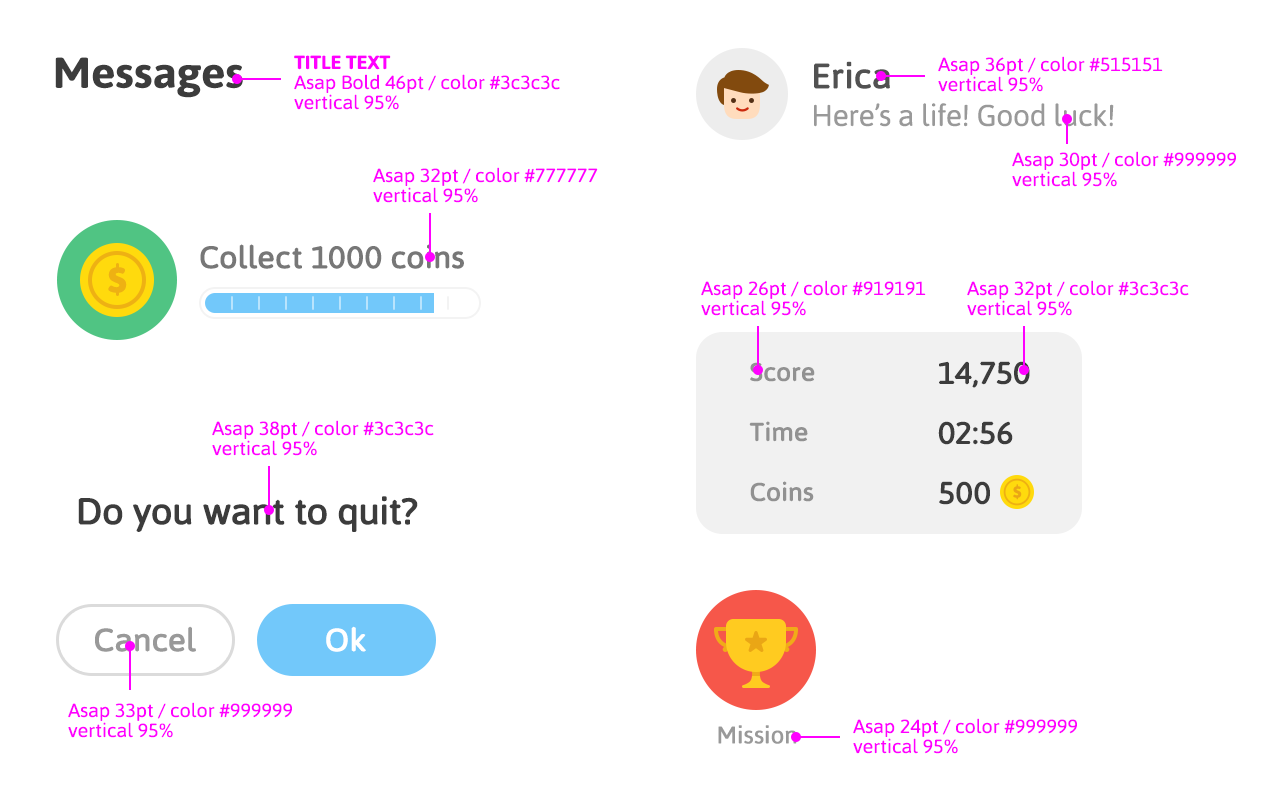
<style>
.page{position:relative;width:1280px;height:800px;background:#ffffff}
.page>*{position:absolute;margin:0}
.t1{font:43.7px "Asap-Bold";letter-spacing:-0.01em;color:#3c3c3c;scale:1.05 1}
.t2{font:19px/20px "Asap-Regular";letter-spacing:-0.01em;color:#ff00ff;scale:1.05 1}
.t3{font:19px/20px "Asap-Bold";letter-spacing:-0.01em;color:#ff00ff;text-transform:uppercase;scale:1.05 1}
.t4{font:34.2px "Asap-Regular";letter-spacing:-0.01em;color:#515151;font-weight:bold;scale:1.05 1}
.t5{font:30px "Asap-Regular";letter-spacing:-0.01em;color:#999999}
.t6{font:30.4px "Asap-Regular";letter-spacing:-0.01em;color:#777777;font-weight:bold;scale:1.05 1}
.t7{font:34.2px "Asap-Bold";letter-spacing:-0.01em;color:#eeb113;font-weight:bold;scale:1.05 1}
.t8{font:24.9px/60px "Asap-Regular";letter-spacing:-0.01em;color:#919191;font-weight:bold;scale:1.05 1}
.t9{font:30.2px/60px "Asap-Regular";letter-spacing:-0.01em;color:#3c3c3c;font-weight:bold;scale:1.05 1}
.t10{font:36.1px "Asap-Regular";letter-spacing:-0.025em;color:#3c3c3c;font-weight:bold;scale:1.05 1}
.t11{font:31.3px "Asap-Regular";letter-spacing:-0.01em;color:#999999;font-weight:bold;scale:1.05 1}
.t12{font:31.3px "Asap-Regular";letter-spacing:-0.01em;color:#ffffff;font-weight:bold;scale:1.05 1}
.t13{font:24px "Asap-Regular";letter-spacing:-0.01em;color:#999999;font-weight:bold}
</style>
<div class="page">
<p class="t1" style="left:55px;top:57px;width:188px;height:41px">Messages</p>
<p class="t2" style="left:294px;top:55px;width:266px;height:55px"><span class="t3">Title Text<br></span>Asap Bold 46pt / color #3c3c3c <br>vertical 95%</p>
<p class="t4" style="left:814px;top:61px;width:76px;height:28px">Erica</p>
<p class="t2" style="left:938px;top:56px;width:225px;height:36px">Asap 36pt / color #515151<br>vertical 95%</p>
<p class="t5" style="left:814px;top:103px;width:300px;height:24px">Here’s a life! Good luck!</p>
<p class="t2" style="left:1012px;top:151px;width:224px;height:36px">Asap 30pt / color #999999<br>vertical 95%</p>
<p class="t2" style="left:373px;top:167px;width:225px;height:36px">Asap 32pt / color #777777<br>vertical 95%</p>
<p class="t6" style="left:200px;top:244px;width:264px;height:25px">Collect 1000 coins</p>
<p class="t7" style="left:108px;top:267px;width:19px;height:26px">S</p>
<p class="t2" style="left:701px;top:280px;width:225px;height:36px">Asap 26pt / color #919191<br>vertical 95%</p>
<p class="t2" style="left:967px;top:280px;width:222px;height:36px">Asap 32pt / color #3c3c3c<br>vertical 95%</p>
<p class="t8" style="left:749px;top:362px;width:66px;height:140px">Score<br>Time<br>Coins</p>
<p class="t9" style="left:938px;top:361px;width:92px;height:144px">14,750<br>02:56<br>500</p>
<p class="t2" style="left:212px;top:420px;width:222px;height:36px">Asap 38pt / color #3c3c3c<br>vertical 95%</p>
<p class="t10" style="left:78px;top:496px;width:340px;height:36px">Do you want to quit?</p>
<p class="t11" style="left:95px;top:626px;width:101px;height:26px">Cancel</p>
<p class="t12" style="left:326px;top:626px;width:40px;height:26px">Ok</p>
<p class="t2" style="left:68px;top:702px;width:224px;height:36px">Asap 33pt / color #999999<br>vertical 95%</p>
<p class="t13" style="left:718px;top:725px;width:79px;height:19px">Mission</p>
<p class="t2" style="left:853px;top:718px;width:224px;height:36px">Asap 24pt / color #999999<br>vertical 95%</p>
</div>
